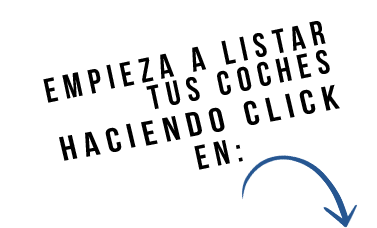
<style>
.page{position:relative;width:377px;height:228px;background:#ffffff}
.page>*{position:absolute;margin:0}
.t1{font:34.1px "BebasNeueBold";letter-spacing:0.2em;color:#000000}
.t2{font:34.3px "BebasNeueBold";letter-spacing:0.2em;color:#000000;scale:1.1 1}
</style>
<div class="page">
<p class="t1" style="left:43px;top:21px;width:283px;height:82px;rotate:-12deg">Empieza a listar</p>
<p class="t1" style="left:146px;top:50px;width:184px;height:60px;rotate:-12deg">tus coches</p>
<p class="t2" style="left:59px;top:84px;width:281px;height:77px;rotate:-11deg">haciendo click</p>
<p class="t1" style="left:194px;top:140px;width:49px;height:30px;rotate:-12deg">en:</p>
</div>
